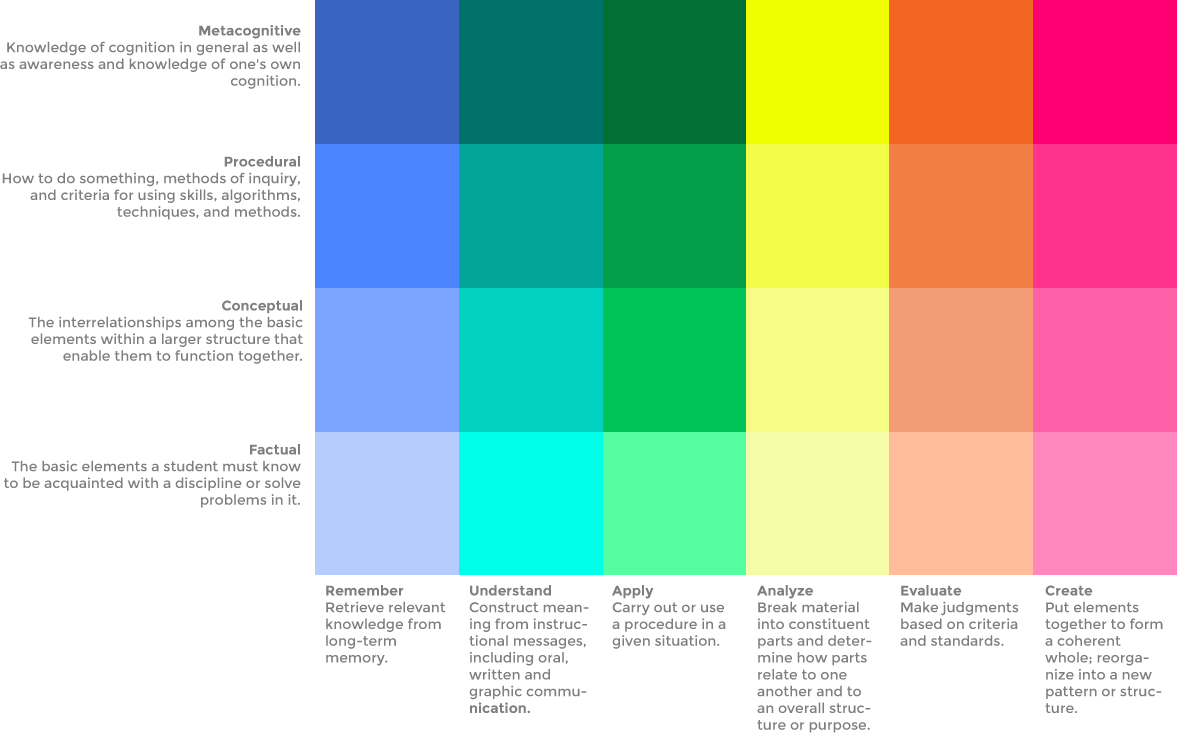
<style>
.page{position:relative;width:1177px;height:733px;background:#ffffff}
.page>*{position:absolute;margin:0}
.t1{font:14px "Montserrat-Regular";color:#7e7e7e}
.t2{font:14px "Montserrat-Bold";color:#7e7e7e}
</style>
<div class="page">
<p class="t1" style="left:0px;top:25px;width:301px;height:64px;text-align:right"><span class="t2">Metacognitive<br></span>Knowledge of cognition in general as well as awareness and knowledge of one's own cognition.</p>
<p class="t1" style="left:2px;top:156px;width:298px;height:64px;text-align:right"><span class="t2">Procedural<br></span>How to do something, methods of inquiry, and criteria for using skills, algorithms, techniques, and methods.</p>
<p class="t1" style="left:28px;top:300px;width:275px;height:64px;text-align:right"><span class="t2">Conceptual<br></span>The interrelationships among the basic elements within a larger structure that enable them to function together.</p>
<p class="t1" style="left:4px;top:444px;width:297px;height:64px;text-align:right"><span class="t2">Factual<br></span>The basic elements a student must know to be acquainted with a discipline or solve problems in it.</p>
<p class="t1" style="left:326px;top:585px;width:120px;height:81px"><span class="t2">Remember<br></span>Retrieve relevant knowledge from long-term memory.</p>
<p class="t1" style="left:469px;top:585px;width:120px;height:128px"><span class="t2">Understand<br></span>Construct meaning from instructional messages, including oral, written and graphic commu<span class="t2">nication.</span></p>
<p class="t1" style="left:612px;top:585px;width:114px;height:64px"><span class="t2">Apply<br></span>Carry out or use a procedure in a given situation.</p>
<p class="t1" style="left:757px;top:585px;width:115px;height:148px"><span class="t2">Analyze<br></span>Break material into constituent parts and determine how parts relate to one another and to an overall structure or purpose.</p>
<p class="t1" style="left:900px;top:585px;width:119px;height:61px"><span class="t2">Evaluate<br></span>Make judgments based on criteria and standards.</p>
<p class="t1" style="left:1045px;top:585px;width:118px;height:128px"><span class="t2">Create<br></span>Put elements together to form a coherent whole; reorganize into a new pattern or structure.</p>
</div>
